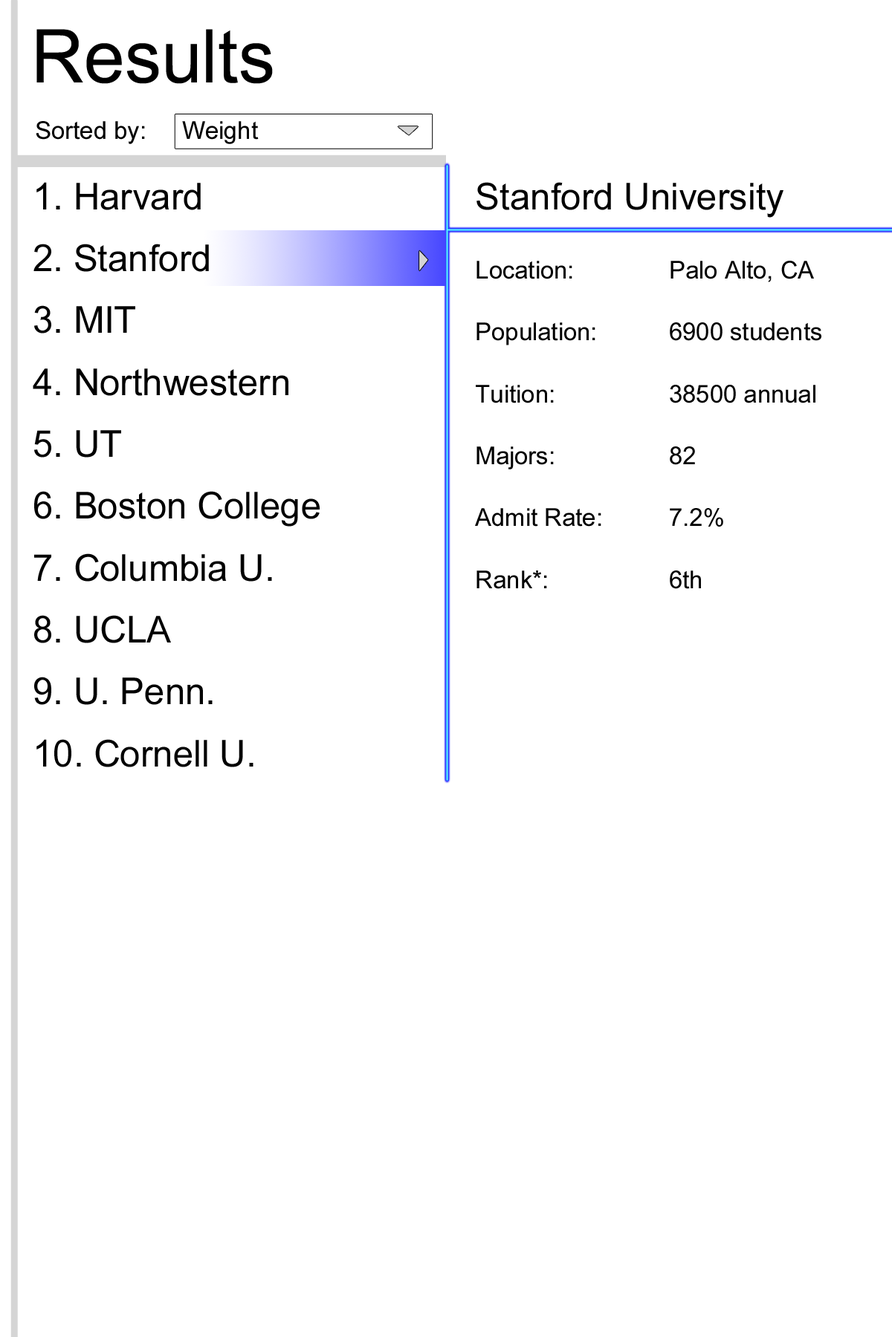
<style>
.page{position:relative;width:892px;height:1337px;background:#ffffff}
.page>*{position:absolute;margin:0}
.t1{font:74.3px "ArialNarrow";color:#000000;scale:1.2 1}
.t2{font:24.8px "ArialNarrow";color:#000000;scale:1.2 1}
.t3{font:37.2px/61.9px "ArialNarrow";color:#000000;scale:1.2 1}
.t4{font:37.2px "ArialNarrow";color:#000000;scale:1.2 1}
.t5{font:24.8px/61.9px "ArialNarrow";color:#000000;scale:1.2 1}
.t6{font:24.8px/31px "ArialNarrow";color:#000000;scale:1.2 1}
</style>
<div class="page">
<p class="t1" style="left:36px;top:29px;width:237px;height:55px">Results</p>
<p class="t2" style="left:36px;top:121px;width:109px;height:23px">Sorted by:</p>
<p class="t2" style="left:182px;top:121px;width:77px;height:23px">Weight</p>
<p class="t3" style="left:33px;top:182px;width:286px;height:586px">1. Harvard<br>2. Stanford<br>3. MIT<br>4. Northwestern<br>5. UT<br>6. Boston College<br>7. Columbia U.<br>8. UCLA<br>9. U. Penn.<br>10. Cornell U.</p>
<p class="t4" style="left:476px;top:182px;width:307px;height:36px">Stanford University</p>
<p class="t5" style="left:475px;top:261px;width:126px;height:328px">Location:<br>Population:<br>Tuition:<br>Majors:<br>Admit Rate:<br>Rank*:</p>
<p class="t6" style="left:669px;top:261px;width:152px;height:328px">Palo Alto, CA<br><br>6900 students<br><br>38500 annual<br><br>82<br><br>7.2%<br><br>6th</p>
</div>
